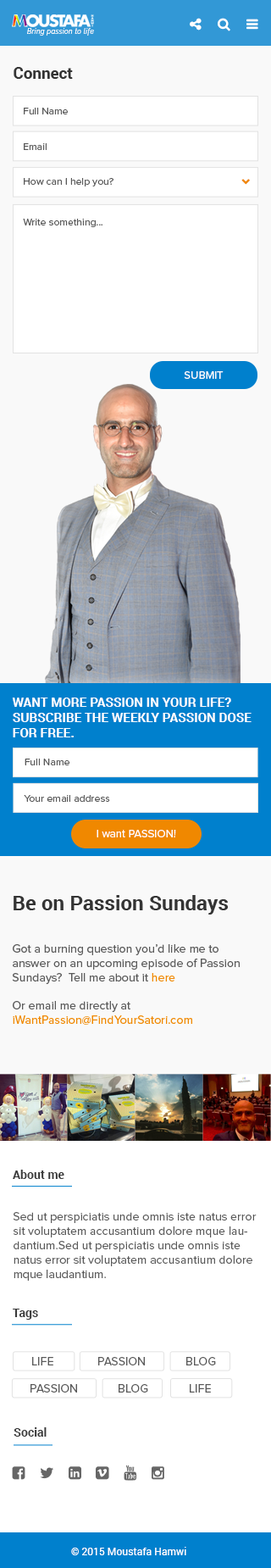
<style>
.page{position:relative;width:271px;height:1568px;background:#ffffff}
.page>*{position:absolute;margin:0}
.t1{font:6.4px "Raleway-Italic";letter-spacing:0.075em;color:#fefefe}
.t2{font:15.8px "Roboto-Bold";letter-spacing:0.005em;color:#343434}
.t3{font:10.2px "ProximaNova-Regular";letter-spacing:0.005em;color:#595959}
.t4{font:11px "ProximaNova-Regular";letter-spacing:0.005em;color:#ffffff}
.t5{font:12.7px "Roboto-Bold";letter-spacing:0.005em;color:#ffffff;text-transform:uppercase}
.t6{font:11.9px "ProximaNova-Regular";letter-spacing:0.005em;color:#595959}
.t7{font:20.3px/27.7px "Roboto-Bold";letter-spacing:0.005em;color:#343434}
.t8{font:11.9px "ProximaNova-Regular";letter-spacing:0.005em;color:#f08800}
.t9{font:11.9px "Roboto-Bold";letter-spacing:0.005em;color:#393939}
.t10{font:10.2px "Roboto-Regular";letter-spacing:0.005em;color:#ffffff}
</style>
<div class="page">
<p class="t1" style="left:27px;top:28px;width:67px;height:8px">Bring passion to life</p>
<p class="t2" style="left:14px;top:67px;width:59px;height:12px">Connect</p>
<p class="t3" style="left:24px;top:108px;width:44px;height:6px">Full Name</p>
<p class="t3" style="left:24px;top:143px;width:23px;height:7px">Email</p>
<p class="t3" style="left:24px;top:178px;width:90px;height:8px">How can I help you?</p>
<p class="t3" style="left:23px;top:219px;width:80px;height:8px">Write something...</p>
<p class="t4" style="left:184px;top:371px;width:40px;height:8px">SUBMIT</p>
<p class="t5" style="left:12px;top:698px;width:240px;height:39px">Want more PASSION in your life? <br>Subscribe the weekly Passion dose for FREE.</p>
<p class="t3" style="left:25px;top:759px;width:45px;height:6px">Full Name</p>
<p class="t3" style="left:24px;top:795px;width:86px;height:7px">Your email address</p>
<p class="t4" style="left:97px;top:830px;width:79px;height:7px">I want PASSION!</p>
<p class="t6" style="left:12px;top:895px;width:228px;height:130px"><span class="t7">Be on Passion Sundays<br><br></span>Got a burning question you’d like me to answer on an upcoming episode of Passion <br>Sundays?  Tell me about it <span class="t8">here<br><br></span>Or email me directly at <br><span class="t8">iWantPassion@FindYourSatori.com</span></p>
<p class="t9" style="left:13px;top:1170px;width:51px;height:9px">About me</p>
<p class="t6" style="left:13px;top:1212px;width:244px;height:69px">Sed ut perspiciatis unde omnis iste natus error sit voluptatem accusantium dolore mque laudantium.Sed ut perspiciatis unde omnis iste natus error sit voluptatem accusantium dolore mque laudantium.</p>
<p class="t9" style="left:13px;top:1309px;width:25px;height:11px">Tags</p>
<p class="t6" style="left:32px;top:1357px;width:21px;height:8px">LIFE</p>
<p class="t6" style="left:98px;top:1357px;width:47px;height:8px">PASSION</p>
<p class="t6" style="left:186px;top:1357px;width:30px;height:8px">BLOG</p>
<p class="t6" style="left:31px;top:1384px;width:46px;height:9px">PASSION</p>
<p class="t6" style="left:119px;top:1384px;width:29px;height:9px">BLOG</p>
<p class="t6" style="left:190px;top:1384px;width:21px;height:9px">LIFE</p>
<p class="t9" style="left:14px;top:1427px;width:33px;height:10px">Social</p>
<p class="t10" style="left:71px;top:1547px;width:115px;height:8px">© 2015 Moustafa Hamwi</p>
</div>
